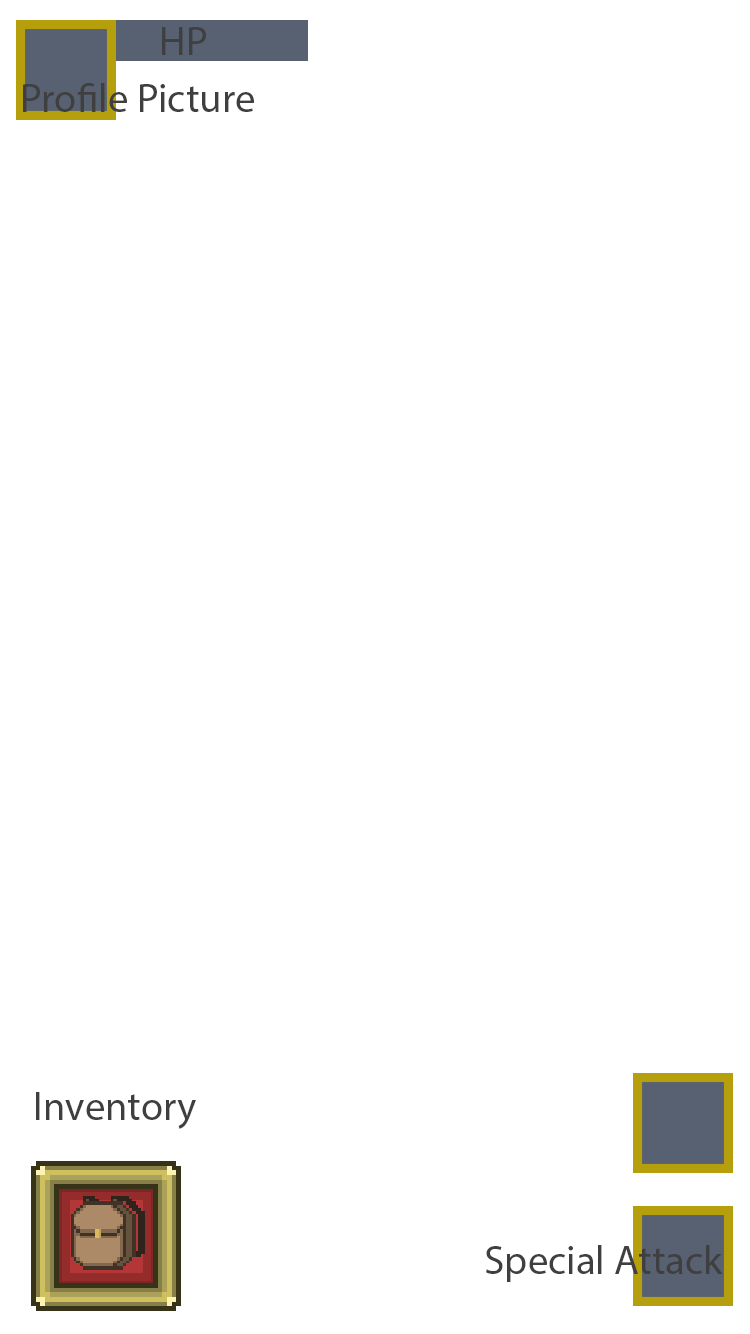
<style>
.page{position:relative;width:750px;height:1334px;background:#ffffff}
.page>*{position:absolute;margin:0}
.t1{font:40.8px "MyriadPro-Regular";color:#403f3f}
</style>
<div class="page">
<p class="t1" style="left:162px;top:27px;width:44px;height:28px">HP</p>
<p class="t1" style="left:23px;top:83px;width:231px;height:29px">Profile Picture</p>
<p class="t1" style="left:36px;top:1092px;width:160px;height:37px">Inventory</p>
<p class="t1" style="left:486px;top:1245px;width:237px;height:37px">Special Attack</p>
</div>
